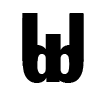
<style>
.page{position:relative;width:100px;height:100px;background:#ffffff}
.page>*{position:absolute;margin:0}
.t1{font:72px "FranklinGothic-Heavy";color:#000000}
</style>
<div class="page">
<p class="t1" style="left:22px;top:13px;width:15px;height:48px">l</p>
<p class="t1" style="left:22px;top:13px;width:15px;height:48px">l</p>
<p class="t1" style="left:23px;top:13px;width:15px;height:48px">l</p>
<p class="t1" style="left:69px;top:13px;width:15px;height:48px">l</p>
<p class="t1" style="left:69px;top:14px;width:15px;height:48px">l</p>
<p class="t1" style="left:22px;top:18px;width:15px;height:48px">l</p>
<p class="t1" style="left:22px;top:34px;width:38px;height:49px">d</p>
<p class="t1" style="left:46px;top:34px;width:38px;height:49px">b</p>
</div>
